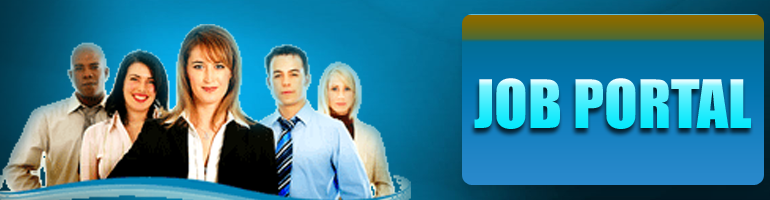
<style>
.page{position:relative;width:770px;height:200px}
.page>*{position:absolute;margin:0}
.t1{font:61.7px "Impact"}
</style>
<div class="page">
<p class="t1" style="left:474px;top:78px;width:277px;height:51px">JOB PORTAL</p>
</div>
